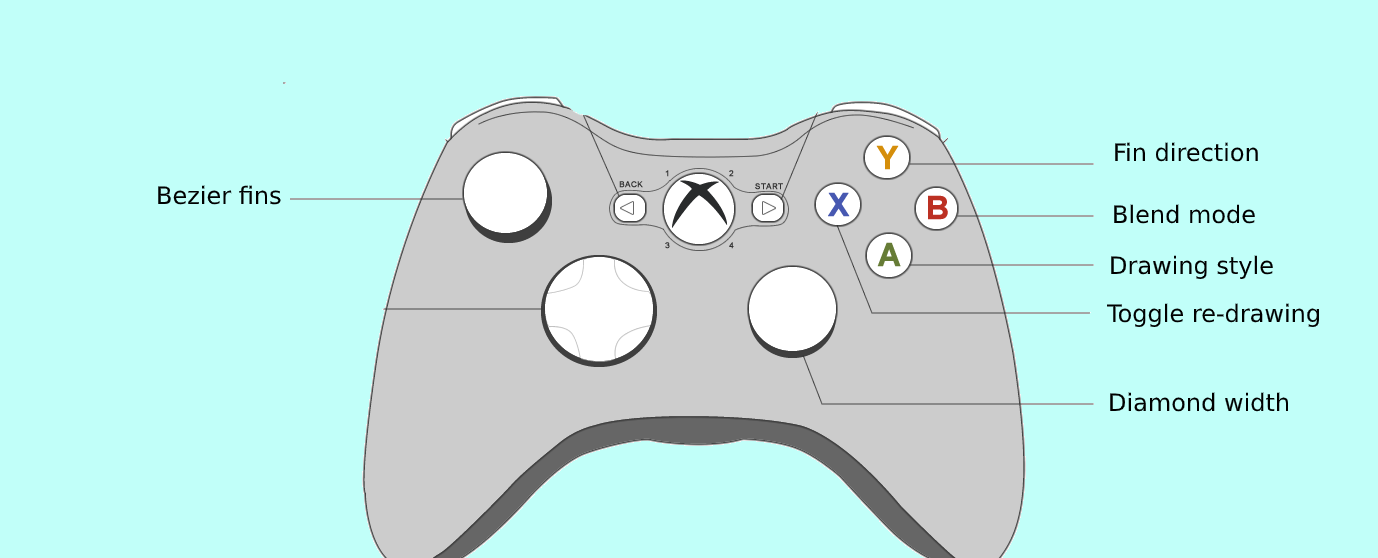
<style>
.page{position:relative;width:1378px;height:558px;background:#c1fff9}
.page>*{position:absolute;margin:0}
.t1{font:24px "DejaVuSans";color:#000000}
</style>
<div class="page">
<p class="t1" style="left:1115px;top:142px;width:143px;height:20px">Fin direction</p>
<p class="t1" style="left:158px;top:185px;width:123px;height:20px">Bezier fins</p>
<p class="t1" style="left:1114px;top:204px;width:141px;height:20px">Blend mode</p>
<p class="t1" style="left:1111px;top:255px;width:162px;height:24px">Drawing style</p>
<p class="t1" style="left:1106px;top:303px;width:213px;height:24px">Toggle re-drawing</p>
<p class="t1" style="left:1110px;top:392px;width:179px;height:20px">Diamond width</p>
</div>
